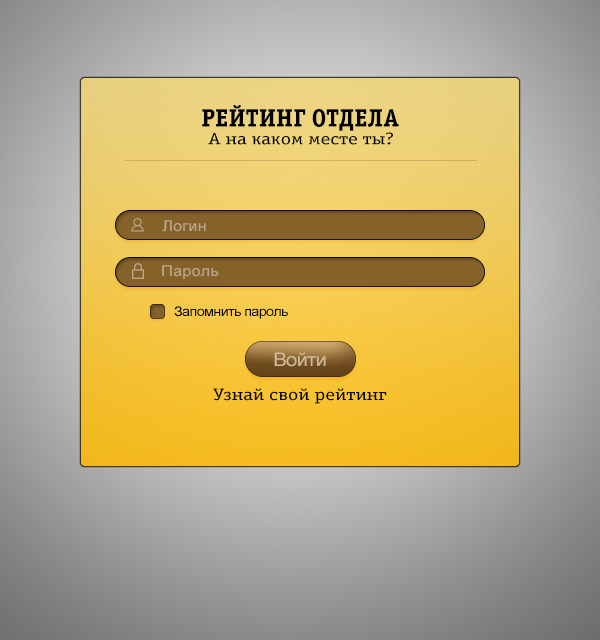
<style>
.page{position:relative;width:600px;height:640px}
.page>*{position:absolute;margin:0}
.t1{font:25px "OfficinaSerifBoldC";color:#000000}
.t2{font:16.7px "OfficinaSerifBookC";color:#000000;scale:1.25 1}
.t3{font:15px "ArialMT";color:#baa688;scale:1.11 1}
.t4{font:13.1px "ArialMT";letter-spacing:-0.05em;color:#000000;scale:1.11 1}
.t5{font:18.7px "ArialMT";letter-spacing:-0.05em;color:#ceb999;scale:1.11 1}
</style>
<div class="page">
<p class="t1" style="left:202px;top:105px;width:197px;height:26px">РЕЙТИНГ ОТДЕЛА</p>
<p class="t2" style="left:208px;top:132px;width:185px;height:13px">А на каком месте ты?</p>
<p class="t3" style="left:162px;top:220px;width:44px;height:12px">Логин</p>
<p class="t3" style="left:162px;top:265px;width:57px;height:14px">Пароль</p>
<p class="t4" style="left:174px;top:306px;width:114px;height:13px">Запомнить пароль</p>
<p class="t5" style="left:274px;top:352px;width:52px;height:15px">Войти</p>
<p class="t2" style="left:213px;top:388px;width:174px;height:16px">Узнай свой рейтинг</p>
</div>
